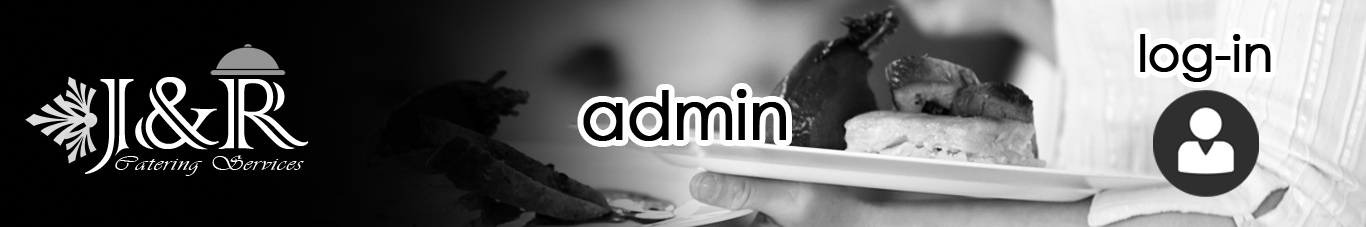
<style>
.page{position:relative;width:1366px;height:227px}
.page>*{position:absolute;margin:0}
.t1{font:49.9px "CenturyGothic";letter-spacing:-0.02em;color:#000000;font-weight:bold}
.t2{font:133.8px "ColonnaMT";letter-spacing:-0.04em;color:#ffffff;text-transform:uppercase}
.t3{font:66.5px "CenturyGothic";letter-spacing:-0.02em;color:#000000;font-weight:bold}
.t4{font:21.3px "Vivaldii";letter-spacing:0.04em;color:#ffffff;scale:1.31 1}
</style>
<div class="page">
<p class="t1" style="left:1140px;top:34px;width:131px;height:48px">log-in</p>
<p class="t2" style="left:85px;top:77px;width:224px;height:97px">j&amp;r</p>
<p class="t3" style="left:583px;top:89px;width:203px;height:52px">admin</p>
<p class="t4" style="left:115px;top:155px;width:189px;height:21px">Catering Services</p>
</div>
